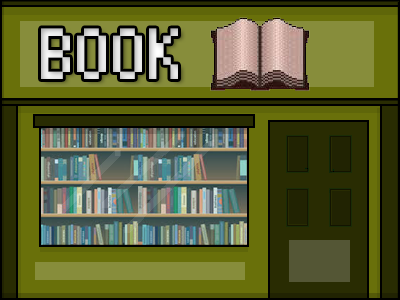
<style>
.page{position:relative;width:400px;height:300px}
.page>*{position:absolute;margin:0}
.t1{font:72px "PixelMplus10-Regular";color:#dedede}
</style>
<div class="page">
<p class="t1" style="left:41px;top:28px;width:137px;height:51px">BOOK</p>
</div>
